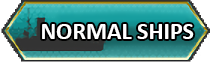
<style>
.page{position:relative;width:210px;height:63px}
.page>*{position:absolute;margin:0}
.t1{font:24px "Calibri-Bold";color:#ffffff}
</style>
<div class="page">
<p class="t1" style="left:42px;top:24px;width:152px;height:15px">NORMAL SHIPS</p>
</div>
